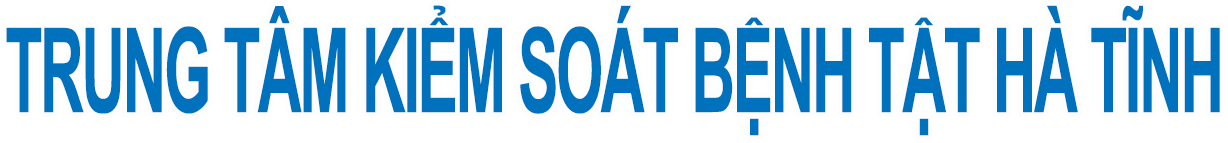
<style>
.page{position:relative;width:1228px;height:143px;background:#ffffff}
.page>*{position:absolute;margin:0}
.t1{font:117.5px "Arial-BoldMT";letter-spacing:-0.04em;color:#0071bd;scale:0.52 1}
</style>
<div class="page">
<p class="t1" style="left:6px;top:5px;width:1214px;height:131px">TRUNG TÂM KIỂM SOÁT BỆNH TẬT HÀ TĨNH</p>
</div>
